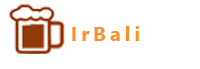
<style>
.page{position:relative;width:200px;height:69px;background:#ffffff}
.page>*{position:absolute;margin:0}
.t1{font:20px "SegoeUI-Bold";letter-spacing:0.2em;color:#ff9026}
</style>
<div class="page">
<p class="t1" style="left:72px;top:26px;width:68px;height:15px">IrBali</p>
</div>
